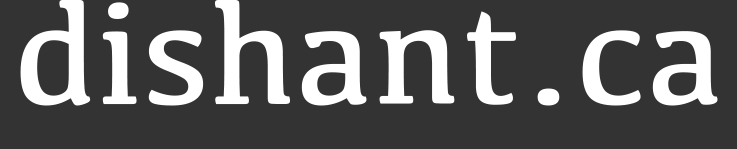
<style>
.page{position:relative;width:737px;height:149px;background:#333333}
.page>*{position:absolute;margin:0}
.t1{font:150px "Kefa-Regular";color:#ffffff}
</style>
<div class="page">
<p class="t1" style="left:20px;top:0px;width:698px;height:106px">dishant.ca</p>
</div>
